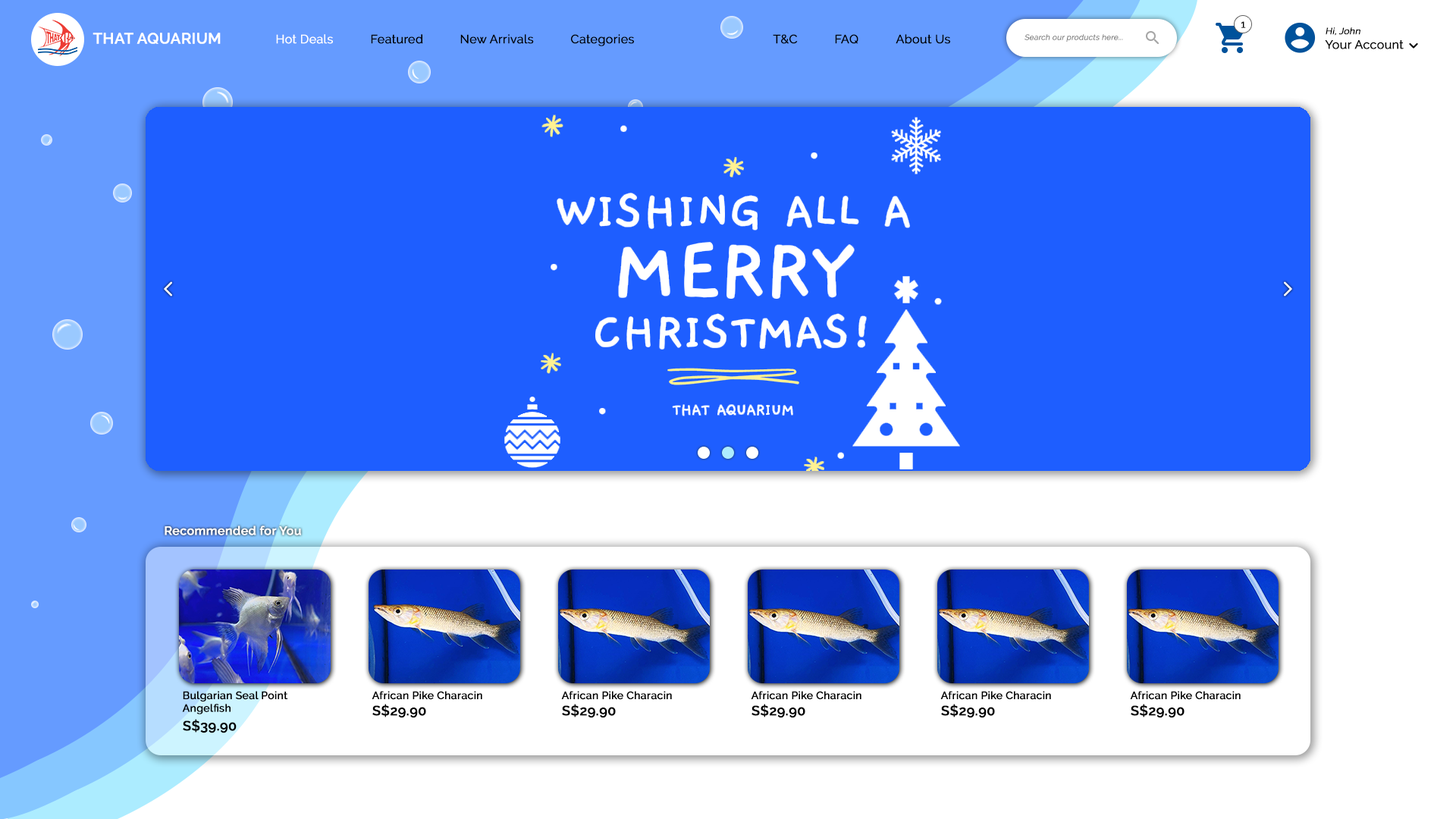
<style>
.page{position:relative;width:1456px;height:819px;background:#1e5eff}
.page>*{position:absolute;margin:0}
.t1{font:10.6px "Raleway-Regular";color:#000000;font-weight:bold}
.t2{font:12.1px "Raleway-Regular";color:#000000;font-weight:bold}
.t3{font:9.1px "Raleway-Regular";color:#000000;font-weight:bold;font-style:italic}
.t4{font:15.2px "Raleway-SemiBold";color:#ffffff;font-weight:bold}
.t5{font:12.1px "Raleway-Regular";color:#ffffff;font-weight:bold}
.t6{font:7.6px "Raleway-Regular";color:#787878;font-weight:bold;font-style:italic}
.t7{font:12.1px "Raleway-SemiBold";color:#ffffff;font-weight:bold}
.t8{font:10.6px "Raleway-Medium";color:#000000;font-weight:bold}
.t9{font:13.6px "Raleway-SemiBold";color:#000000;font-weight:bold}
</style>
<div class="page">
<p class="t1" style="left:1241px;top:21px;width:5px;height:7px">1</p>
<p class="t2" style="left:1325px;top:27px;width:79px;height:22px"><span class="t3">Hi, John<br></span>Your Account</p>
<p class="t4" style="left:93px;top:33px;width:128px;height:11px">THAT AQUARIUM</p>
<p class="t5" style="left:276px;top:34px;width:57px;height:10px">Hot Deals</p>
<p class="t2" style="left:371px;top:34px;width:52px;height:10px">Featured</p>
<p class="t2" style="left:460px;top:34px;width:74px;height:10px">New Arrivals</p>
<p class="t2" style="left:571px;top:34px;width:63px;height:12px">Categories</p>
<p class="t2" style="left:773px;top:34px;width:25px;height:10px">T&amp;C</p>
<p class="t2" style="left:835px;top:34px;width:23px;height:10px">FAQ</p>
<p class="t2" style="left:896px;top:34px;width:54px;height:10px">About Us</p>
<p class="t6" style="left:1024px;top:34px;width:99px;height:8px">Search our products here...</p>
<p class="t7" style="left:165px;top:526px;width:136px;height:9px">Recommended for You</p>
<p class="t8" style="left:182px;top:691px;width:106px;height:23px">Bulgarian Seal Point <br>Angelfish</p>
<p class="t8" style="left:372px;top:691px;width:110px;height:9px">African Pike Characin</p>
<p class="t8" style="left:561px;top:691px;width:111px;height:9px">African Pike Characin</p>
<p class="t8" style="left:751px;top:691px;width:110px;height:9px">African Pike Characin</p>
<p class="t8" style="left:940px;top:691px;width:111px;height:9px">African Pike Characin</p>
<p class="t8" style="left:1130px;top:691px;width:111px;height:9px">African Pike Characin</p>
<p class="t9" style="left:372px;top:704px;width:54px;height:14px">S$29.90</p>
<p class="t9" style="left:562px;top:704px;width:54px;height:14px">S$29.90</p>
<p class="t9" style="left:751px;top:704px;width:54px;height:14px">S$29.90</p>
<p class="t9" style="left:941px;top:704px;width:54px;height:14px">S$29.90</p>
<p class="t9" style="left:1131px;top:704px;width:54px;height:14px">S$29.90</p>
<p class="t9" style="left:183px;top:719px;width:54px;height:14px">S$39.90</p>
</div>
